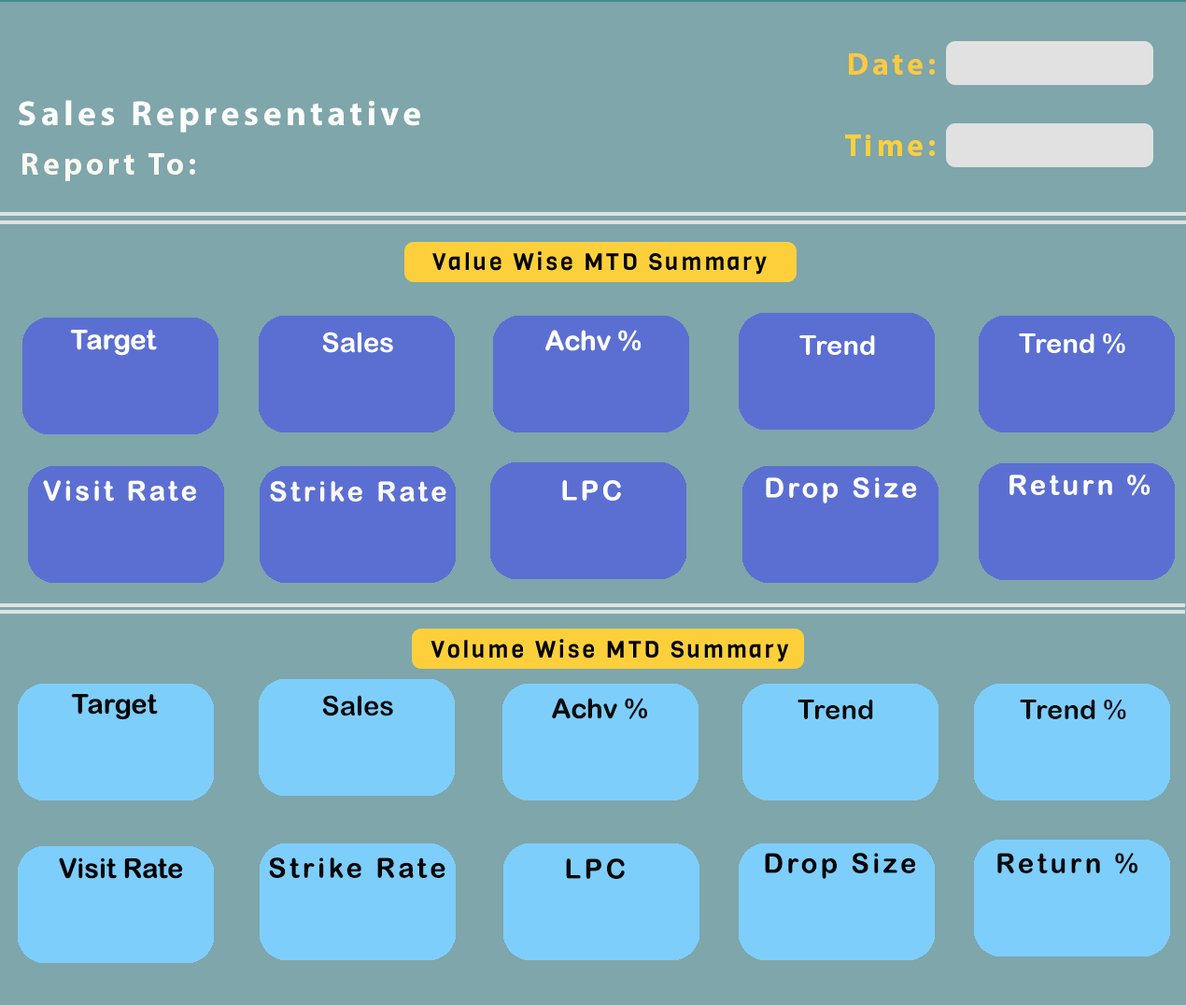
<style>
.page{position:relative;width:1186px;height:1005px;background:#7ea6ab}
.page>*{position:absolute;margin:0}
.t1{font:31.1px "MyriadPro-Bold";letter-spacing:0.12em;color:#fdc93f}
.t2{font:35px "MyriadPro-Bold";letter-spacing:0.12em;color:#fdfdfd}
.t3{font:31.1px "MyriadPro-Bold";letter-spacing:0.12em;color:#fdd03b}
.t4{font:31.1px "MyriadPro-Bold";letter-spacing:0.12em;color:#fbf9f1}
.t5{font:23.4px "Viga-Regular";letter-spacing:0.12em;color:#050505}
.t6{font:27.2px "ArialRoundedMTBold";color:#ffffff}
.t7{font:27.2px "ArialRoundedMTBold";letter-spacing:0.12em;color:#fdfdfd}
.t8{font:27.2px "ArialRoundedMTBold";letter-spacing:0.12em;color:#f9f9f9}
.t9{font:27.2px "ArialRoundedMTBold";letter-spacing:0.12em;color:#fcffff}
.t10{font:27.2px "ArialRoundedMTBold";letter-spacing:0.12em;color:#ffffff}
.t11{font:23.4px "Viga-Regular";letter-spacing:0.12em;color:#000000}
.t12{font:27.2px "ArialRoundedMTBold";color:#060606}
.t13{font:27.2px "ArialRoundedMTBold";color:#070707}
.t14{font:27.2px "ArialRoundedMTBold";color:#0b0b0b}
.t15{font:27.2px "ArialRoundedMTBold";color:#0a0a0a}
.t16{font:27.2px "ArialRoundedMTBold";color:#010101}
.t17{font:27.2px "ArialRoundedMTBold";letter-spacing:0.12em;color:#050505}
.t18{font:27.2px "ArialRoundedMTBold";letter-spacing:0.12em;color:#000000}
.t19{font:27.2px "ArialRoundedMTBold";letter-spacing:0.12em;color:#080808}
.t20{font:27.2px "ArialRoundedMTBold";letter-spacing:0.12em;color:#070707}
</style>
<div class="page">
<p class="t1" style="left:849px;top:53px;width:86px;height:22px">Date:</p>
<p class="t2" style="left:19px;top:100px;width:401px;height:33px">Sales Representative</p>
<p class="t3" style="left:845px;top:135px;width:90px;height:21px">Time:</p>
<p class="t4" style="left:22px;top:153px;width:173px;height:28px">Report To:</p>
<p class="t5" style="left:433px;top:251px;width:334px;height:24px">Value Wise MTD Summary</p>
<p class="t6" style="left:70px;top:330px;width:87px;height:26px">Target</p>
<p class="t6" style="left:546px;top:330px;width:95px;height:21px">Achv %</p>
<p class="t6" style="left:322px;top:332px;width:71px;height:21px">Sales</p>
<p class="t6" style="left:800px;top:335px;width:75px;height:20px">Trend</p>
<p class="t6" style="left:1019px;top:333px;width:107px;height:21px">Trend %</p>
<p class="t7" style="left:43px;top:480px;width:153px;height:22px">Visit Rate</p>
<p class="t8" style="left:270px;top:481px;width:177px;height:21px">Strike Rate</p>
<p class="t9" style="left:562px;top:480px;width:59px;height:21px">LPC</p>
<p class="t10" style="left:766px;top:477px;width:151px;height:26px">Drop Size</p>
<p class="t10" style="left:1010px;top:475px;width:140px;height:21px">Return %</p>
<p class="t11" style="left:431px;top:639px;width:358px;height:23px">Volume Wise MTD Summary</p>
<p class="t12" style="left:71px;top:694px;width:87px;height:26px">Target</p>
<p class="t13" style="left:322px;top:695px;width:71px;height:21px">Sales</p>
<p class="t14" style="left:552px;top:698px;width:95px;height:21px">Achv %</p>
<p class="t15" style="left:798px;top:700px;width:75px;height:19px">Trend</p>
<p class="t14" style="left:1020px;top:700px;width:107px;height:20px">Trend %</p>
<p class="t16" style="left:59px;top:858px;width:124px;height:21px">Visit Rate</p>
<p class="t17" style="left:269px;top:858px;width:177px;height:20px">Strike Rate</p>
<p class="t18" style="left:765px;top:853px;width:151px;height:26px">Drop Size</p>
<p class="t19" style="left:998px;top:853px;width:140px;height:21px">Return %</p>
<p class="t20" style="left:566px;top:858px;width:59px;height:21px">LPC</p>
</div>
